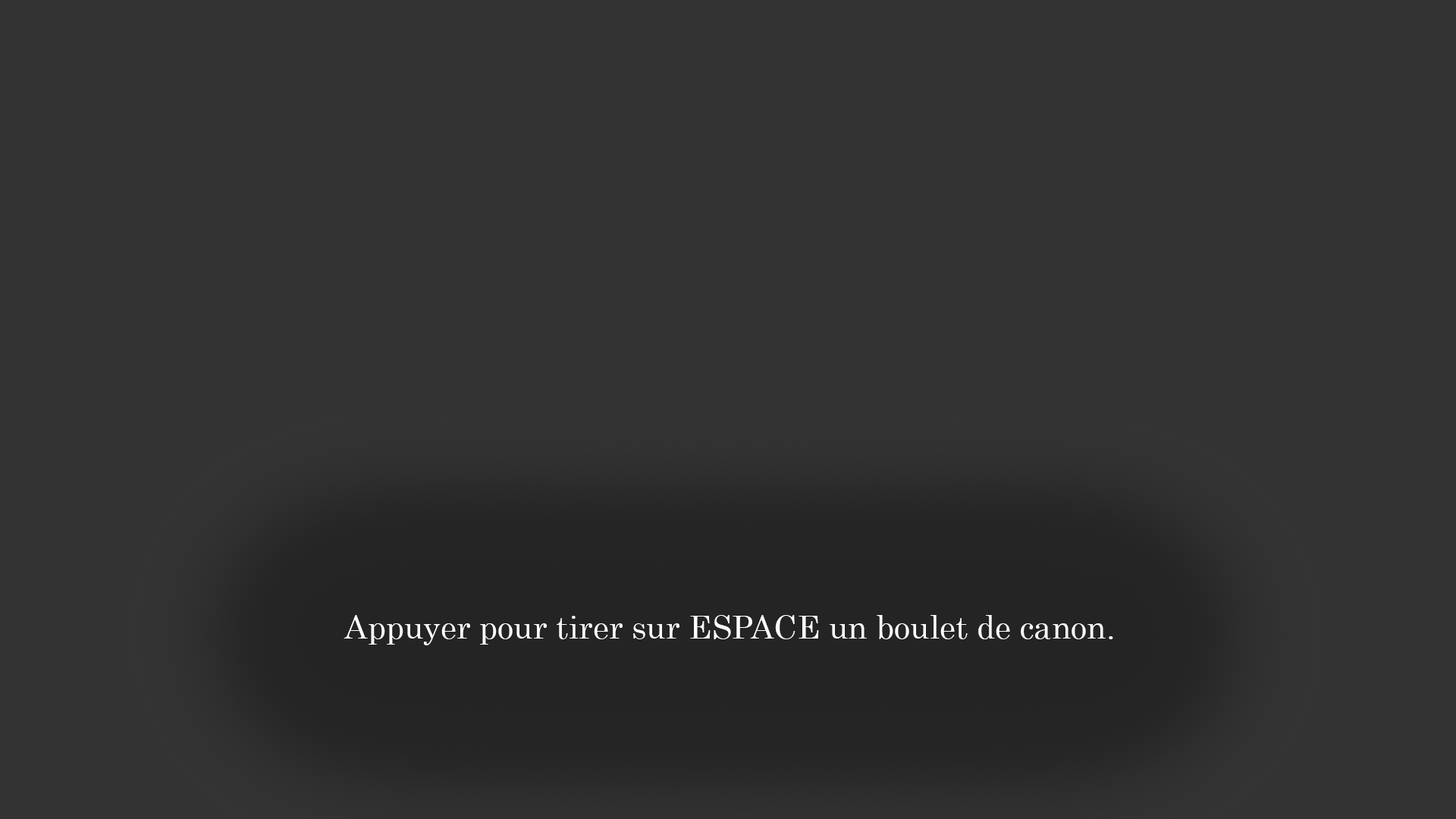
<style>
.page{position:relative;width:1456px;height:819px;background:#333333}
.page>*{position:absolute;margin:0}
.t1{font:31.8px "Century";color:#ffffff}
</style>
<div class="page">
<p class="t1" style="left:344px;top:615px;width:769px;height:30px">Appuyer pour tirer sur ESPACE un boulet de canon.</p>
</div>
